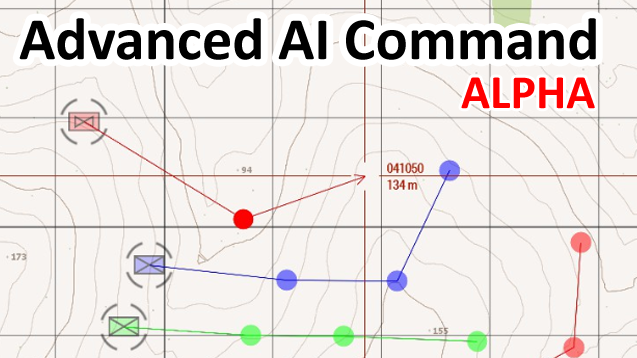
<style>
.page{position:relative;width:637px;height:358px;background:#f8f4f1}
.page>*{position:absolute;margin:0}
.t1{font:60px "Calibri-Bold";color:#000000}
.t2{font:48px "Calibri-Bold";color:#ff0000}
</style>
<div class="page">
<p class="t1" style="left:19px;top:18px;width:577px;height:42px">Advanced AI Command</p>
<p class="t2" style="left:461px;top:77px;width:134px;height:32px">ALPHA</p>
</div>
